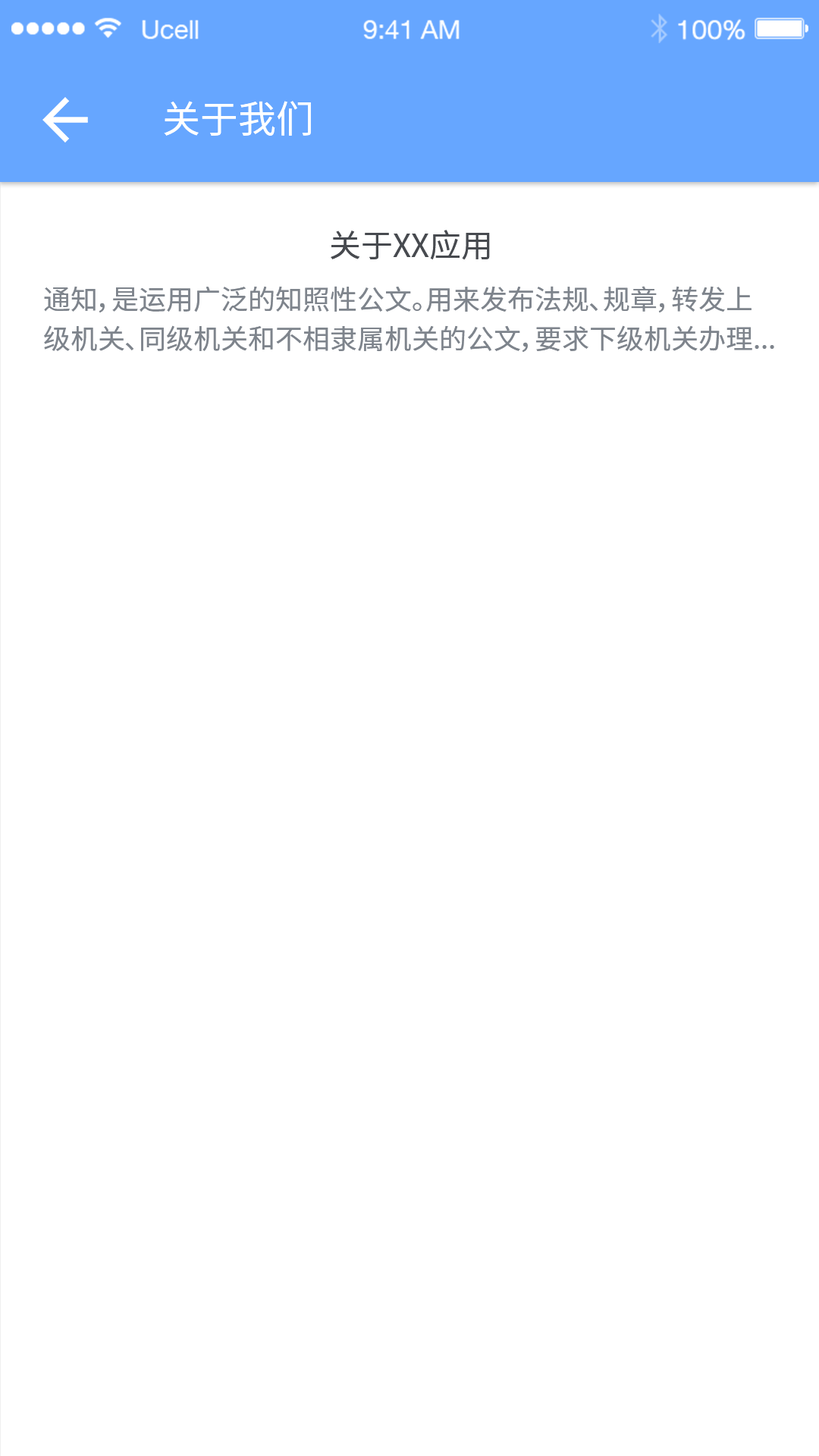
<style>
.page{position:relative;width:819px;height:1456px;background:#ffffff}
.page>*{position:absolute;margin:0}
.t1{font:37.9px "NotoSansHans-Regular";color:#ffffff}
.t2{font:31.8px "NotoSansHans-Regular";color:#474a4f}
.t3{font:27.3px/39.4px "NotoSansHans-Regular";color:#7e848c}
</style>
<div class="page">
<p class="t1" style="left:164px;top:101px;width:147px;height:35px">关于我们</p>
<p class="t2" style="left:331px;top:230px;width:159px;height:30px">关于XX应用</p>
<p class="t3" style="left:44px;top:286px;width:730px;height:67px">通知，是运用广泛的知照性公文。用来发布法规、规章，转发上级机关、同级机关和不相隶属机关的公文，要求下级机关办理...</p>
</div>
